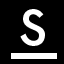
<style>
.page{position:relative;width:64px;height:64px;background:#000000}
.page>*{position:absolute;margin:0}
.t1{font:70px "Apercu-Regular";color:#ffffff}
</style>
<div class="page">
<p class="t1" style="left:20px;top:9px;width:25px;height:37px">s</p>
</div>
